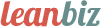
<style>
.page{position:relative;width:101px;height:27px;background:#ffffff}
.page>*{position:absolute;margin:0}
.t1{font:36px "Lobster1.4";color:#d7594c}
.t2{font:36px "Lobster1.4";color:#678e8d}
</style>
<div class="page">
<p class="t1" style="left:0px;top:0px;width:101px;height:27px">lean<span class="t2">biz</span></p>
</div>
